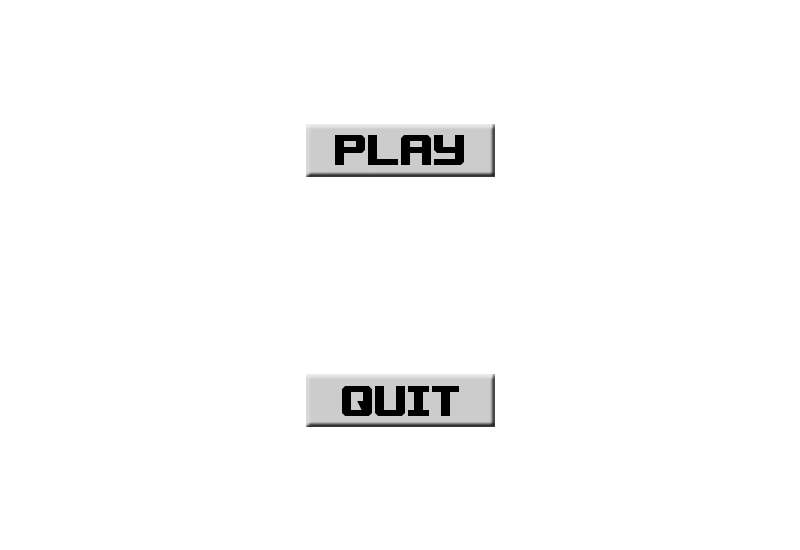
<style>
.page{position:relative;width:800px;height:550px;background:#ffffff}
.page>*{position:absolute;margin:0}
.t1{font:30px "MINE-SWEEPER";color:#000000}
</style>
<div class="page">
<p class="t1" style="left:335px;top:135px;width:129px;height:30px">Play</p>
<p class="t1" style="left:342px;top:386px;width:117px;height:30px">Quit</p>
</div>
